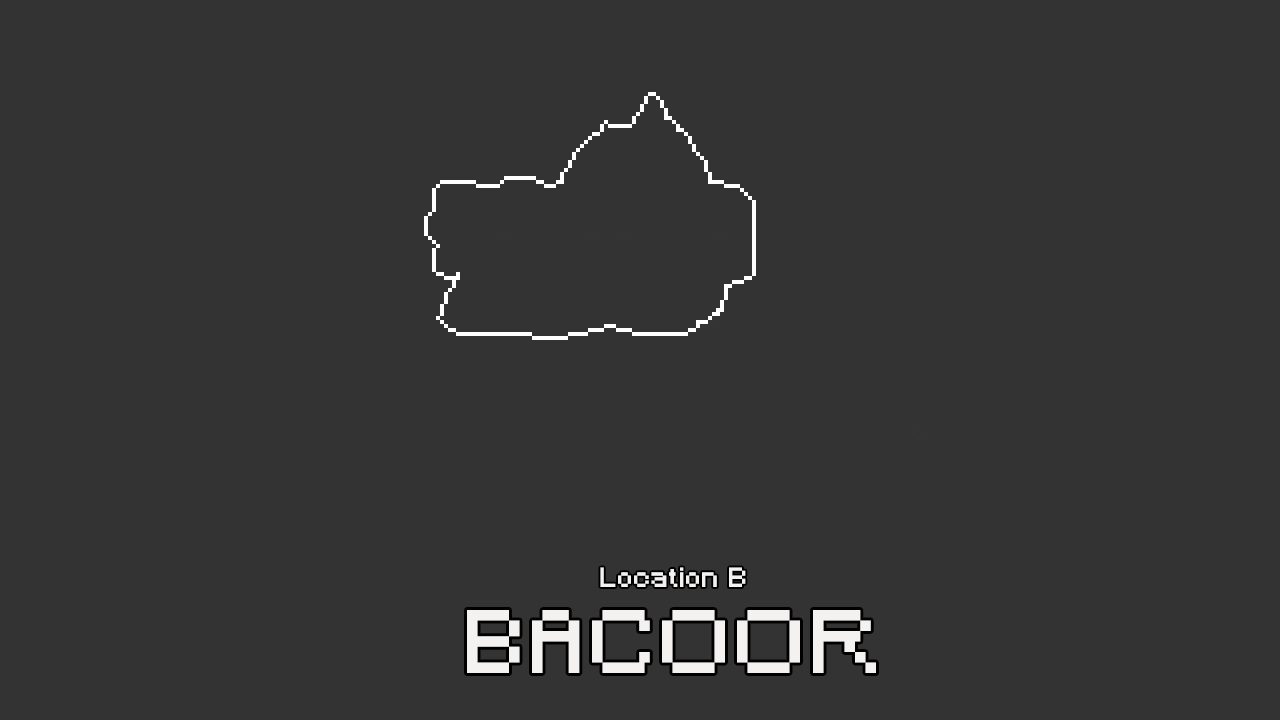
<style>
.page{position:relative;width:1280px;height:720px;background:#333333}
.page>*{position:absolute;margin:0}
.t1{font:26px "Minecraft";letter-spacing:0.05em;color:#f4f1f1}
.t2{font:84px "Minecraft";letter-spacing:0.1em;color:#f4f1f1}
</style>
<div class="page">
<p class="t1" style="left:600px;top:567px;width:146px;height:20px;text-align:center">Location B<br><br>TA</p>
<p class="t2" style="left:467px;top:610px;width:409px;height:63px">BACOOR</p>
</div>
